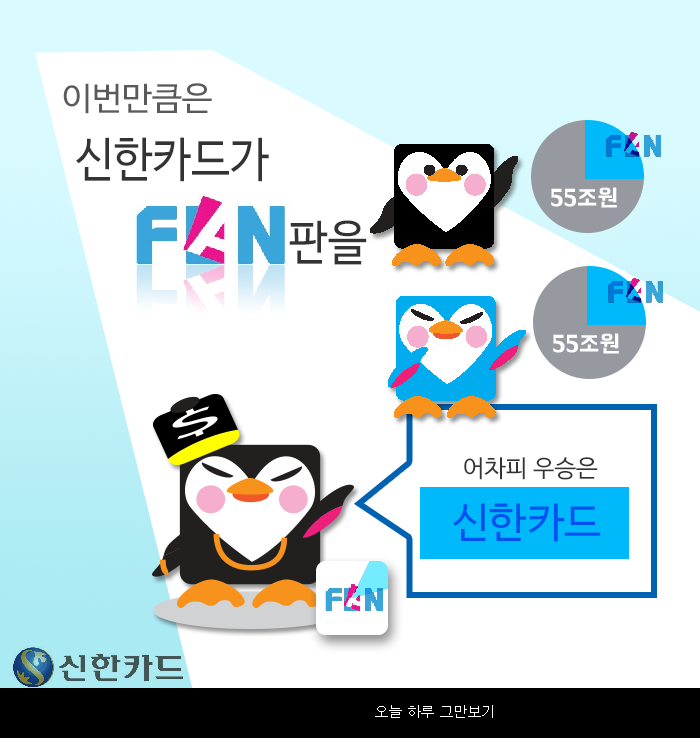
<style>
.page{position:relative;width:700px;height:738px;background:#ffffff}
.page>*{position:absolute;margin:0}
.t1{font:32.6px "NanumBarunGothic";color:#5a5a5a;scale:1.04 1}
.t2{font:47.7px "NanumBarunGothic";color:#333333;scale:0.91 1}
.t3{font:24.1px "BMHANNAPro";color:#ffffff}
.t4{font:24.1px "NanumBarunGothic";color:#333333}
.t5{font:41.6px "NanumBarunGothic";color:#0050f2}
.t6{font:14px "Dotum";color:#ffffff}
</style>
<div class="page">
<p class="t1" style="left:63px;top:83px;width:149px;height:31px">이번만큼은</p>
<p class="t2" style="left:76px;top:137px;width:193px;height:45px">신한카드가</p>
<p class="t3" style="left:551px;top:187px;width:66px;height:21px">55조원</p>
<p class="t2" style="left:289px;top:220px;width:78px;height:45px">판을</p>
<p class="t3" style="left:553px;top:333px;width:66px;height:21px">55조원</p>
<p class="t4" style="left:464px;top:457px;width:134px;height:23px">어차피 우승은</p>
<p class="t5" style="left:453px;top:503px;width:148px;height:39px">신한카드</p>
<p class="t6" style="left:375px;top:705px;width:118px;height:13px">오늘 하루 그만보기</p>
</div>
